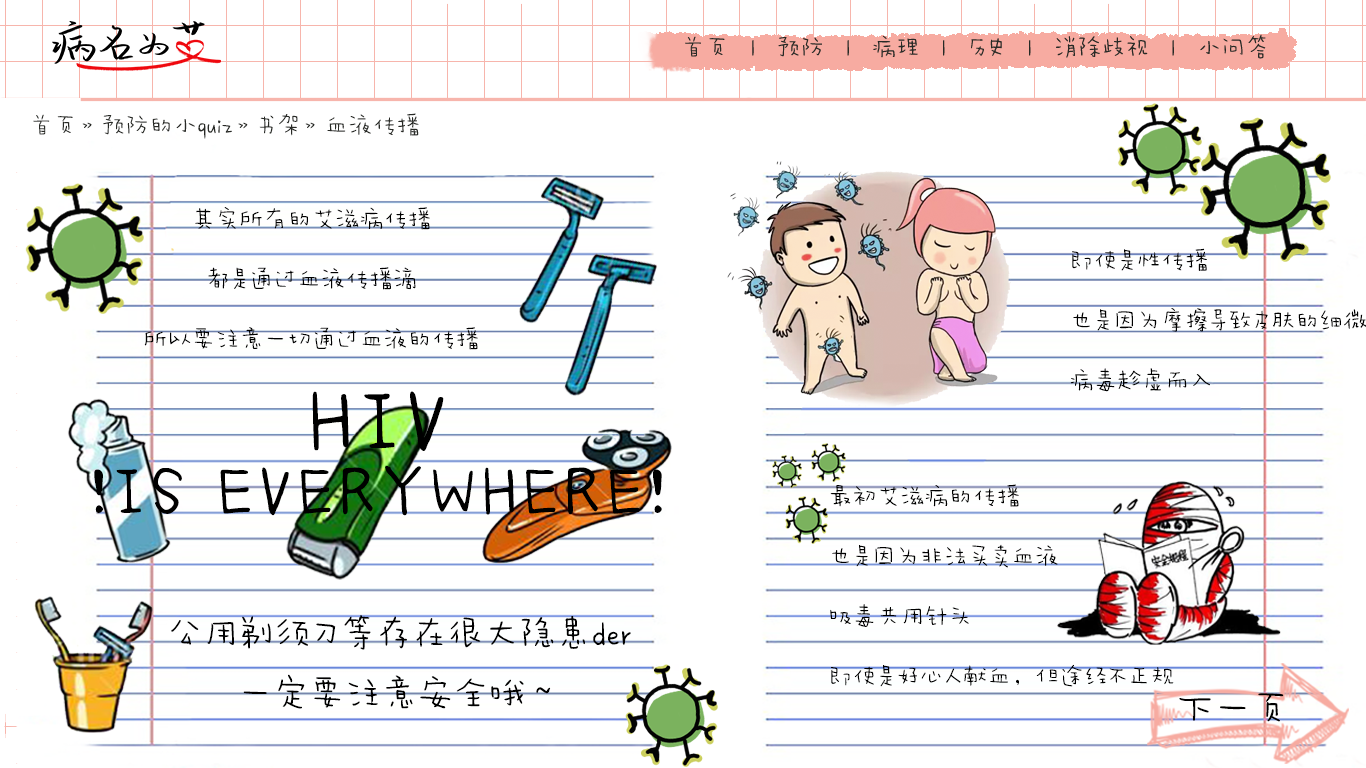
<style>
.page{position:relative;width:1366px;height:768px;background:#ffffff}
.page>*{position:absolute;margin:0}
.t1{font:24px "AaWanWan";color:#282a26}
.t2{font:24px/60px "AaWanWan";color:#000000}
.t3{font:72px/80px "AaWanWan";letter-spacing:0.07em;color:#000000}
.t4{font:90px/80px "AaWanWan";letter-spacing:0.07em;color:#000000}
.t5{font:36px/60px "AaWanWan";color:#000000}
.t6{font:39.9px "AaWanWan";letter-spacing:-0.05em;color:#000000}
</style>
<div class="page">
<p class="t1" style="left:33px;top:113px;width:386px;height:26px">首页》预防的小quiz》书架》血液传播</p>
<p class="t2" style="left:144px;top:207px;width:334px;height:143px;text-align:center">其实所有的艾滋病传播<br>都是通过血液传播滴<br>所以要注意一切通过血液的传播</p>
<p class="t3" style="left:94px;top:391px;width:568px;height:125px;text-align:center"><span class="t4">HIV<br></span>!IS EVERYWHERE!</p>
<p class="t2" style="left:830px;top:484px;width:344px;height:203px">最初艾滋病的传播<br>也是因为非法买卖血液<br>吸毒共用针头<br>即使是好心人献血，但途经不正规</p>
<p class="t5" style="left:171px;top:615px;width:460px;height:94px;text-align:center">公用剃须刀等存在很大隐患der<br>一定要注意安全哦～</p>
<p class="t6" style="left:1179px;top:693px;width:105px;height:29px">下一页</p>
</div>
